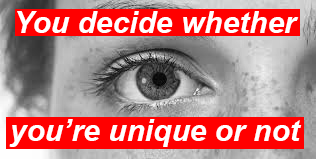
<style>
.page{position:relative;width:316px;height:159px;background:#ff0000}
.page>*{position:absolute;margin:0}
.t1{font:30px "Arial-BoldItalicMT";color:#ffffff}
</style>
<div class="page">
<p class="t1" style="left:9px;top:11px;width:293px;height:136px;text-align:center">You decide whether<br><br><br>you’re unique or not</p>
</div>
